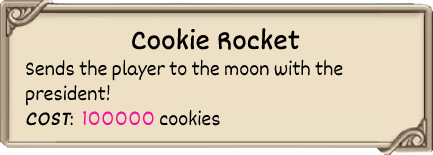
<style>
.page{position:relative;width:433px;height:155px;background:#ede0c4}
.page>*{position:absolute;margin:0}
.t1{font:29px "Dekko";color:#000000;font-weight:bold}
.t2{font:21px "Dekko";color:#000000}
.t3{font:21px "Dekko";color:#000000;font-weight:bold;font-style:italic}
.t4{font:21px "Dekko";color:#f0129a}
</style>
<div class="page">
<p class="t1" style="left:132px;top:28px;width:168px;height:22px">Cookie Rocket</p>
<p class="t2" style="left:26px;top:59px;width:317px;height:67px">Sends the player to the moon with the <br>president!<br><span class="t3">COST</span>:  <span class="t4">100000 </span>cookies</p>
</div>
